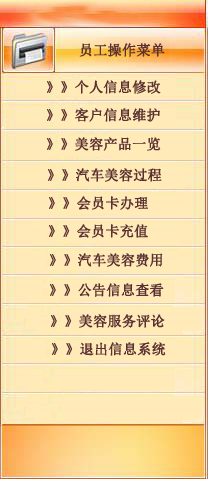
<style>
.page{position:relative;width:208px;height:479px;background:#ffeab8}
.page>*{position:absolute;margin:0}
.t1{font:14px "NSimSun";color:#5a3030;font-weight:bold}
</style>
<div class="page">
<p class="t1" style="left:79px;top:43px;width:86px;height:14px">员工操作菜单</p>
<p class="t1" style="left:47px;top:80px;width:114px;height:14px">》》个人信息修改</p>
<p class="t1" style="left:47px;top:108px;width:113px;height:14px">》》客户信息维护</p>
<p class="t1" style="left:47px;top:137px;width:114px;height:14px">》》美容产品一览</p>
<p class="t1" style="left:48px;top:168px;width:114px;height:14px">》》汽车美容过程</p>
<p class="t1" style="left:49px;top:196px;width:99px;height:14px">》》会员卡办理</p>
<p class="t1" style="left:49px;top:224px;width:99px;height:14px">》》会员卡充值</p>
<p class="t1" style="left:50px;top:253px;width:113px;height:14px">》》汽车美容费用</p>
<p class="t1" style="left:50px;top:283px;width:114px;height:14px">》》公告信息查看</p>
<p class="t1" style="left:51px;top:314px;width:114px;height:14px">》》美容服务评论</p>
<p class="t1" style="left:52px;top:342px;width:114px;height:14px">》》退出信息系统</p>
</div>
